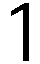
<style>
.page{position:relative;width:40px;height:64px;background:#ffffff}
.page>*{position:absolute;margin:0}
.t1{font:74px "OPPOSans-R";color:#000000}
</style>
<div class="page">
<p class="t1" style="left:11px;top:3px;width:18px;height:58px">1</p>
</div>
